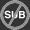
<style>
.page{position:relative;width:30px;height:30px;background:#333333}
.page>*{position:absolute;margin:0}
.t1{font:10px "Helvetica-Bold";letter-spacing:0.01em;color:#ffffff;font-variant:small-caps}
</style>
<div class="page">
<p class="t1" style="left:4px;top:10px;width:21px;height:9px">SUB</p>
</div>
